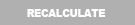
<style>
.page{position:relative;width:135px;height:25px;background:#b0b0b0}
.page>*{position:absolute;margin:0}
.t1{font:18.2px "Arial-Black";color:#ffffff;scale:0.9 1}
</style>
<div class="page">
<p class="t1" style="left:27px;top:9px;width:79px;height:8px">RECALCULATE</p>
</div>
